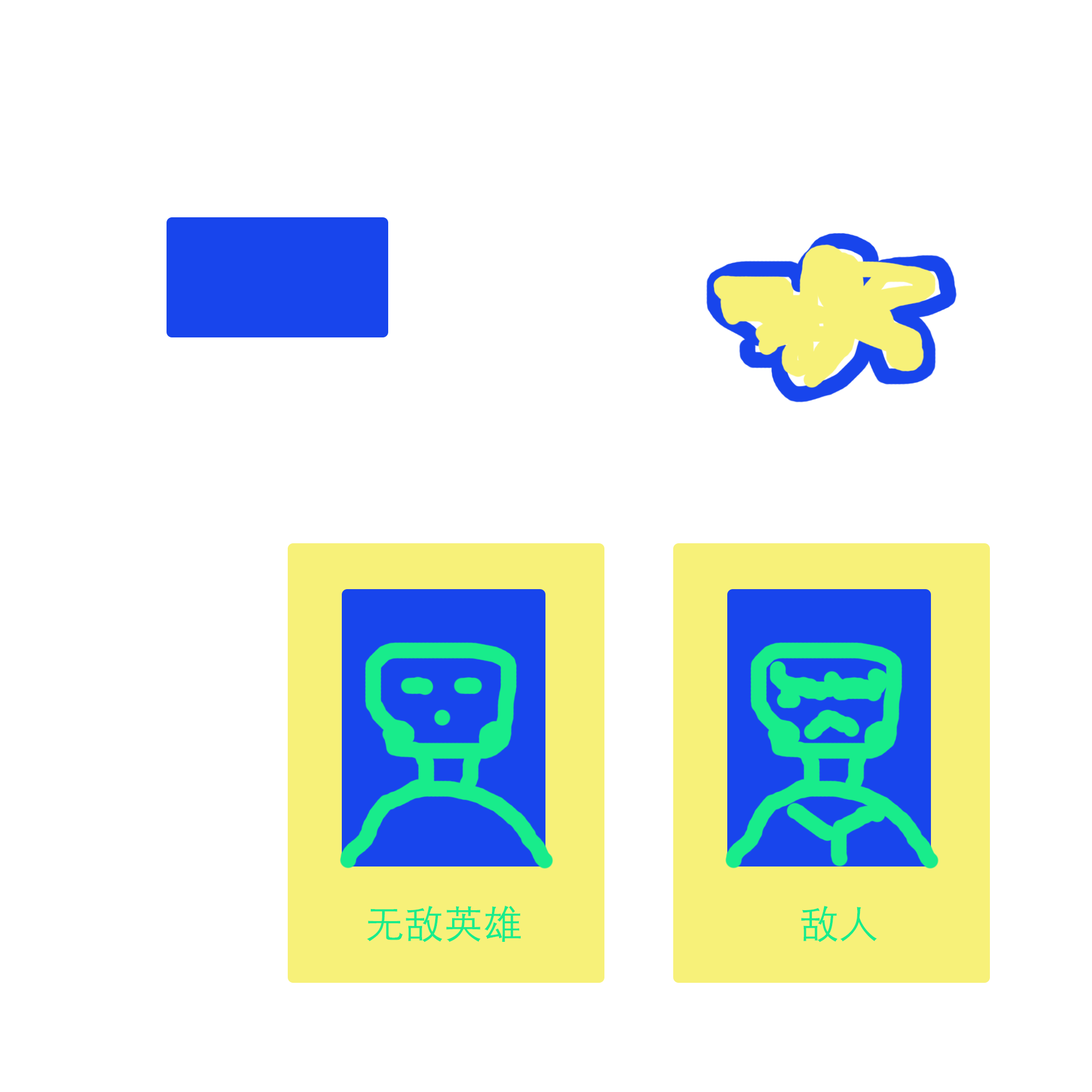
<style>
.page{position:relative;width:1092px;height:1092px;background:#ffffff}
.page>*{position:absolute;margin:0}
.t1{font:39.3px "STHeitiSC-Light";color:#18ec8b}
</style>
<div class="page">
<p class="t1" style="left:367px;top:905px;width:154px;height:37px">无敌英雄</p>
<p class="t1" style="left:801px;top:906px;width:76px;height:36px">敌人</p>
</div>
